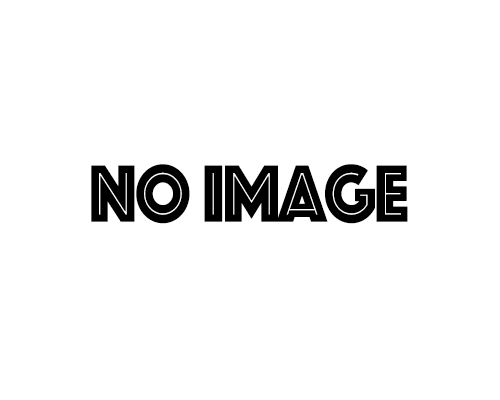
<style>
.page{position:relative;width:500px;height:400px;background:#ffffff}
.page>*{position:absolute;margin:0}
.t1{font:83.3px "Phosphate-Inline";letter-spacing:-0.05em;color:#000000;font-variant:small-caps;font-weight:bold;scale:0.9 1}
.t2{font:83.3px "Phosphate-Inline";letter-spacing:-0.05em;color:#000000;font-weight:bold;scale:0.9 1}
</style>
<div class="page">
<p class="t1" style="left:91px;top:164px;width:317px;height:60px">NO I<span class="t2">mage</span></p>
</div>
